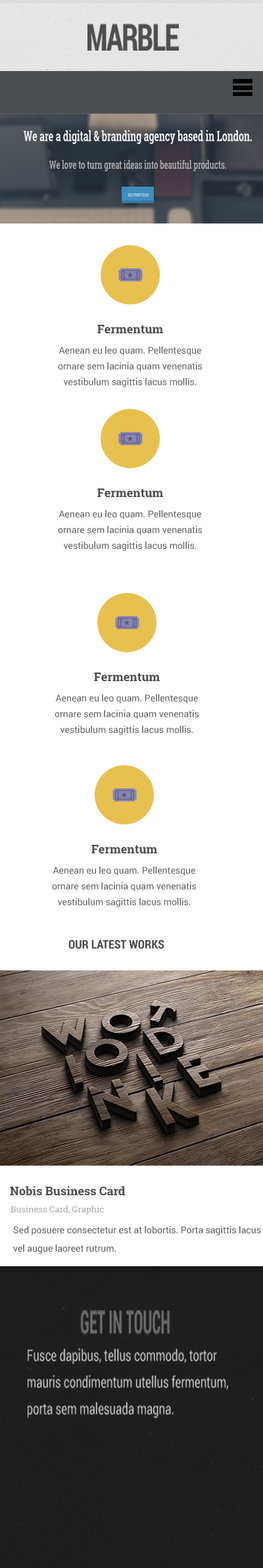
<style>
.page{position:relative;width:263px;height:1568px;background:#ffffff}
.page>*{position:absolute;margin:0}
.t1{font:37.3px "RobotoCondensed-Bold";letter-spacing:-0.05em;color:#4e4e4e;text-transform:uppercase;scale:0.8 1}
.t2{font:14.4px "RobotoSlab-Bold";color:#f3f3f3;scale:0.65 1}
.t3{font:11.5px "RobotoSlab-Bold";color:#a8a8a8;scale:0.65 1}
.t4{font:5px "Roboto-Condensed";text-transform:uppercase;scale:0.65 1}
.t5{font:11.8px "RobotoSlab-Bold";color:#4e4e4e}
.t6{font:9.2px/15.8px "Roboto-Regular";color:#616161}
.t7{font:11.8px "RobotoCondensed-Bold";color:#4e4e4e;text-transform:uppercase}
.t8{font:8.5px "RobotoSlab-Regular";color:#a8a8a8}
.t9{font:9.2px/18.4px "Roboto-Regular";color:#5c5c5c}
.t10{font:31.7px "RobotoCondensed-Bold";color:#6c6c6c;text-transform:uppercase;scale:0.51 1}
.t11{font:15.6px/26.7px "Roboto-Regular";color:#cacaca;scale:0.71 1}
</style>
<div class="page">
<p class="t1" style="left:87px;top:24px;width:92px;height:27px">Marble</p>
<p class="t2" style="left:24px;top:130px;width:228px;height:14px">We are a digital &amp; branding agency based in London.</p>
<p class="t3" style="left:49px;top:160px;width:177px;height:12px">We love to turn great ideas into beautiful products.</p>
<p class="t4" style="left:128px;top:193px;width:21px;height:4px">see Portfolio</p>
<p class="t5" style="left:97px;top:325px;width:66px;height:9px">Fermentum</p>
<p class="t6" style="left:58px;top:346px;width:144px;height:41px;text-align:center">Aenean eu leo quam. Pellentesque ornare sem lacinia quam venenatis vestibulum sagittis lacus mollis.</p>
<p class="t5" style="left:97px;top:488px;width:66px;height:10px">Fermentum</p>
<p class="t6" style="left:58px;top:510px;width:144px;height:41px;text-align:center">Aenean eu leo quam. Pellentesque ornare sem lacinia quam venenatis vestibulum sagittis lacus mollis.</p>
<p class="t5" style="left:94px;top:673px;width:66px;height:9px">Fermentum</p>
<p class="t6" style="left:55px;top:694px;width:144px;height:41px;text-align:center">Aenean eu leo quam. Pellentesque ornare sem lacinia quam venenatis vestibulum sagittis lacus mollis.</p>
<p class="t5" style="left:91px;top:845px;width:66px;height:9px">Fermentum</p>
<p class="t6" style="left:52px;top:867px;width:145px;height:40px;text-align:center">Aenean eu leo quam. Pellentesque ornare sem lacinia quam venenatis vestibulum sagittis lacus mollis.</p>
<p class="t7" style="left:68px;top:939px;width:96px;height:10px">Our Latest Works</p>
<p class="t5" style="left:10px;top:1186px;width:116px;height:10px">Nobis Business Card</p>
<p class="t8" style="left:11px;top:1206px;width:93px;height:8px">Business Card, Graphic</p>
<p class="t9" style="left:13px;top:1225px;width:248px;height:29px">Sed posuere consectetur est at lobortis. Porta sagittis lacus vel augue laoreet rutrum.</p>
<p class="t10" style="left:80px;top:1310px;width:90px;height:25px">Get In Touch</p>
<p class="t11" style="left:28px;top:1348px;width:200px;height:70px">Fusce dapibus, tellus commodo, tortor mauris condimentum utellus fermentum, porta sem malesuada magna.</p>
</div>
